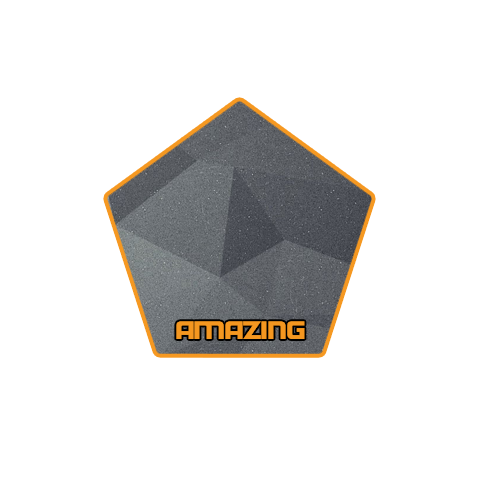
<style>
.page{position:relative;width:500px;height:500px;background:#ffffff}
.page>*{position:absolute;margin:0}
.t1{font:22px "HyundaiNormal";color:#f49720}
</style>
<div class="page">
<p class="t1" style="left:176px;top:321px;width:129px;height:18px">Amazing</p>
</div>
